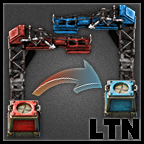
<style>
.page{position:relative;width:144px;height:144px}
.page>*{position:absolute;margin:0}
.t1{font:28px "MADETOMMY-Black";color:#000000;font-variant:small-caps}
</style>
<div class="page">
<p class="t1" style="left:90px;top:119px;width:49px;height:20px">LTN</p>
</div>
